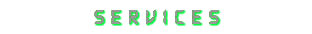
<style>
.page{position:relative;width:312px;height:34px;background:#ffffff}
.page>*{position:absolute;margin:0}
.t1{font:22px "DS-Digital-Bold";letter-spacing:0.27em;color:#999999;text-transform:uppercase}
</style>
<div class="page">
<p class="t1" style="left:94px;top:9px;width:125px;height:16px">services</p>
</div>
